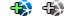
<style>
.page{position:relative;width:64px;height:16px;background:#ffffff}
.page>*{position:absolute;margin:0}
.t1{font:22.8px "Cambria-Bold";color:#54ff54}
.t2{font:22.8px "Cambria-Bold";color:#c9c9c9}
</style>
<div class="page">
<p class="t1" style="left:11px;top:3px;width:12px;height:10px">+</p>
<p class="t2" style="left:43px;top:3px;width:12px;height:10px">+</p>
</div>
